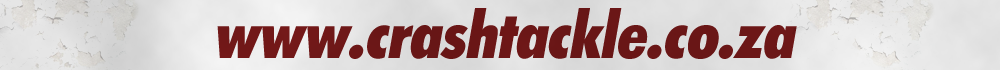
<style>
.page{position:relative;width:1000px;height:70px}
.page>*{position:absolute;margin:0}
.t1{font:65px "LimerickExtraBoldCond";color:#6b0101;font-style:italic}
</style>
<div class="page">
<p class="t1" style="left:217px;top:8px;width:580px;height:51px;opacity:0.9">www.crashtackle.co.za</p>
</div>
